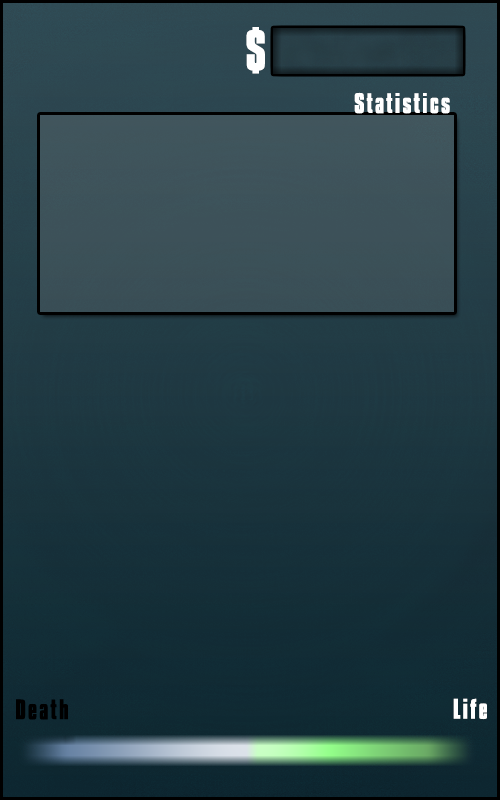
<style>
.page{position:relative;width:500px;height:800px}
.page>*{position:absolute;margin:0}
.t1{font:50px "KenyanCoffeeRg-Bold";letter-spacing:0.08em;color:#ffffff}
.t2{font:25px "KenyanCoffeeRg-Bold";letter-spacing:0.08em;color:#ffffff}
.t3{font:25px "KenyanCoffeeRg-Bold";letter-spacing:0.08em;color:#000000}
</style>
<div class="page">
<p class="t1" style="left:246px;top:27px;width:19px;height:47px">$</p>
<p class="t2" style="left:354px;top:92px;width:96px;height:22px">Statistics</p>
<p class="t3" style="left:16px;top:699px;width:52px;height:21px">Death</p>
<p class="t2" style="left:453px;top:698px;width:34px;height:22px">Life</p>
</div>
